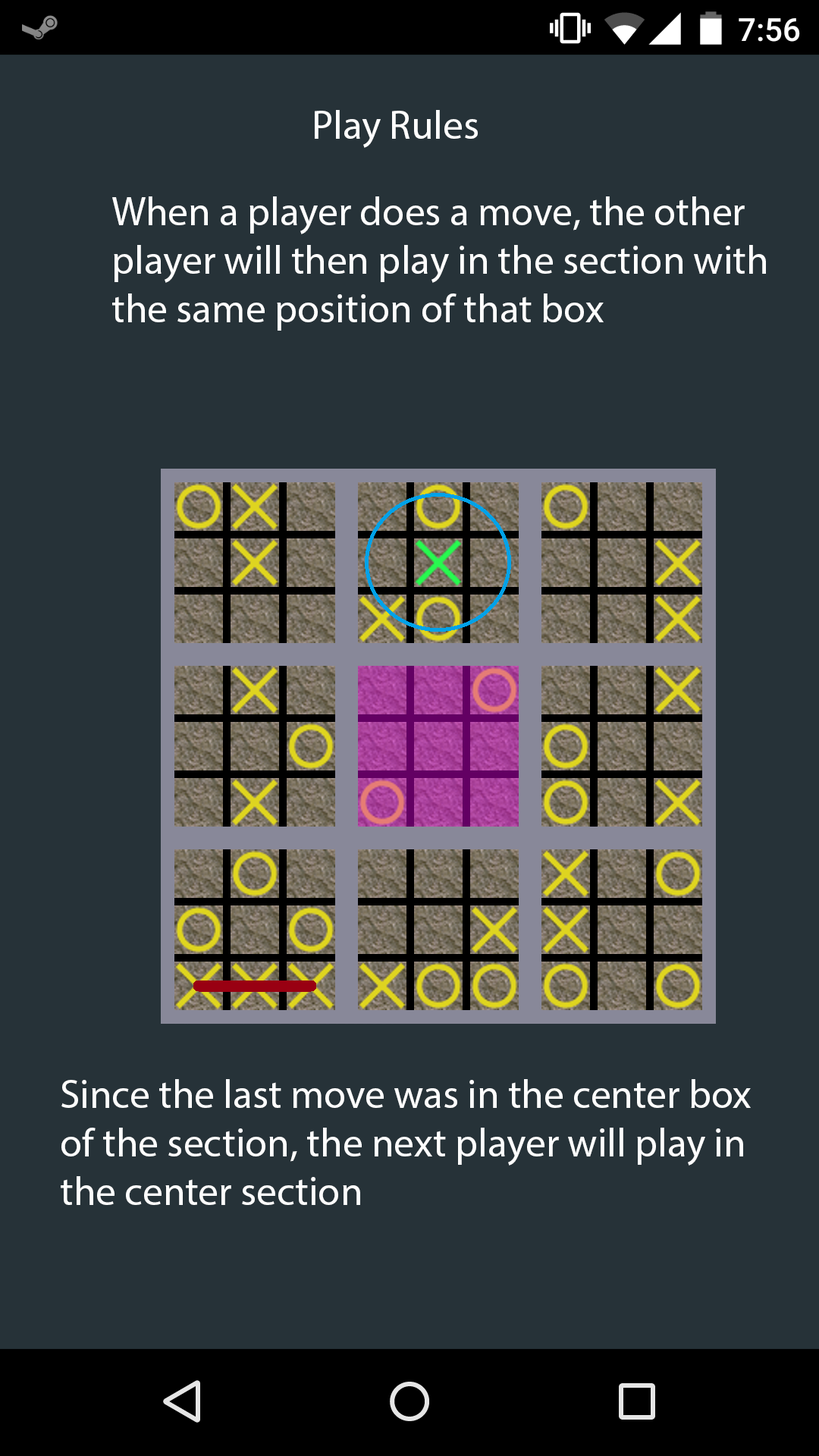
<style>
.page{position:relative;width:819px;height:1456px;background:#263238}
.page>*{position:absolute;margin:0}
.t1{font:40.4px "MyriadPro-Regular";color:#fefefe}
</style>
<div class="page">
<p class="t1" style="left:315px;top:110px;width:163px;height:38px">Play Rules</p>
<p class="t1" style="left:112px;top:196px;width:654px;height:135px">When a player does a move, the other <br>player will then play in the section with<br>the same position of that box</p>
<p class="t1" style="left:61px;top:1079px;width:690px;height:126px">Since the last move was in the center box<br>of the section, the next player will play in <br>the center section</p>
</div>
